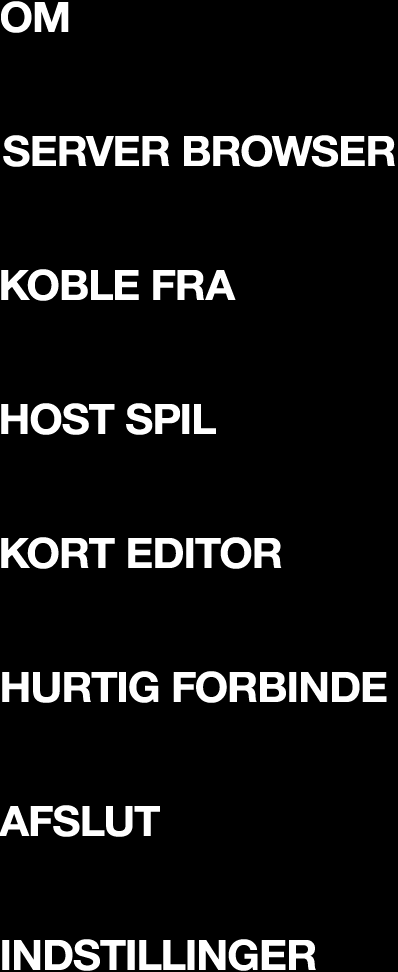
<style>
.page{position:relative;width:398px;height:972px;background:#000000}
.page>*{position:absolute;margin:0}
.t1{font:42px "HelveticaNeueBold";letter-spacing:-0.021em;color:#ffffff;scale:1.03 1}
</style>
<div class="page">
<p class="t1" style="left:1px;top:1px;width:68px;height:32px">OM</p>
<p class="t1" style="left:3px;top:135px;width:392px;height:32px">SERVER BROWSER</p>
<p class="t1" style="left:1px;top:269px;width:235px;height:32px">KOBLE FRA</p>
<p class="t1" style="left:1px;top:403px;width:215px;height:32px">HOST SPIL</p>
<p class="t1" style="left:1px;top:537px;width:281px;height:32px">KORT EDITOR</p>
<p class="t1" style="left:2px;top:671px;width:385px;height:32px">HURTIG FORBINDE</p>
<p class="t1" style="left:0px;top:805px;width:160px;height:32px">AFSLUT</p>
<p class="t1" style="left:2px;top:939px;width:314px;height:32px">INDSTILLINGER</p>
</div>
